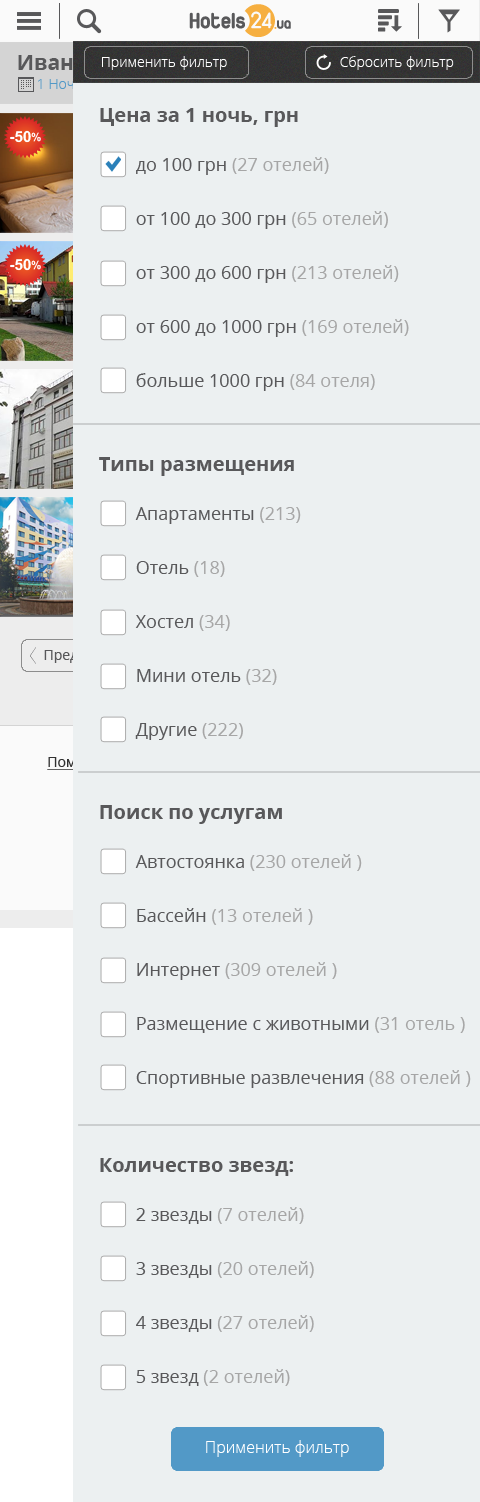
<style>
.page{position:relative;width:480px;height:1502px;background:#ecf0f1}
.page>*{position:absolute;margin:0}
.t1{font:14px "OpenSans-Light";color:#ffffff}
.t2{font:20px "OpenSans-Bold";color:#58585a}
.t3{font:18px/54px "OpenSans";color:#58585a}
.t4{font:18px/54px "OpenSans";color:#a6a6a6}
.t5{font:16px "OpenSans-Light";color:#ffffff}
</style>
<div class="page">
<p class="t1" style="left:102px;top:56px;width:125px;height:14px">Применить фильтр</p>
<p class="t1" style="left:340px;top:56px;width:114px;height:14px">Сбросить фильтр</p>
<p class="t2" style="left:100px;top:108px;width:198px;height:19px">Цена за 1 ночь, грн</p>
<p class="t3" style="left:136px;top:157px;width:273px;height:234px">до 100 грн <span class="t4">(27 отелей) <br></span>от 100 до 300 грн <span class="t4">(65 отелей) <br></span>от 300 до 600 грн <span class="t4">(213 отелей)</span> <br>от 600 до 1000 грн <span class="t4">(169 отелей)</span> <br>больше 1000 грн <span class="t4">(84 отеля)</span></p>
<p class="t2" style="left:99px;top:457px;width:195px;height:19px">Типы размещения</p>
<p class="t3" style="left:135px;top:507px;width:166px;height:233px">Апартаменты <span class="t4">(213) <br></span>Отель <span class="t4">(18)</span> <br>Хостел <span class="t4">(34)</span> <br>Мини отель <span class="t4">(32) <br></span>Другие <span class="t4">(222)</span></p>
<p class="t2" style="left:100px;top:805px;width:182px;height:19px">Поиск по услугам</p>
<p class="t3" style="left:135px;top:854px;width:336px;height:234px">Автостоянка <span class="t4">(230 отелей )</span> <br>Бассейн <span class="t4">(13 отелей )</span> <br>Интернет <span class="t4">(309 отелей ) <br></span>Размещение с животными <span class="t4">(31 отель ) <br></span>Спортивные развлечения <span class="t4">(88 отелей )</span></p>
<p class="t2" style="left:100px;top:1158px;width:193px;height:18px">Количество звезд:</p>
<p class="t4" style="left:136px;top:1207px;width:178px;height:179px"><span class="t3">2 звезды </span>(7 отелей)<span class="t3"> <br>3 звезды </span>(20 отелей) <br><span class="t3">4 звезды </span>(27 отелей) <br><span class="t3">5 звезд </span>(2 отелей)</p>
<p class="t5" style="left:206px;top:1440px;width:143px;height:17px">Применить фильтр</p>
</div>
